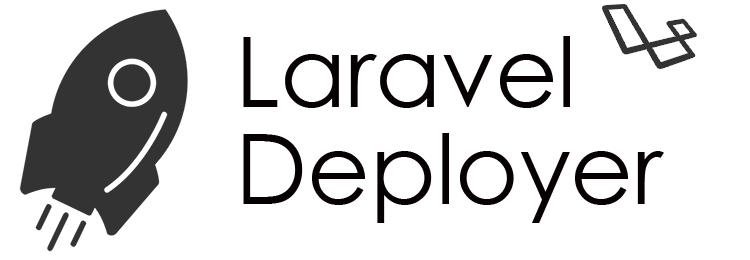
<style>
.page{position:relative;width:750px;height:260px;background:#ffffff}
.page>*{position:absolute;margin:0}
.t1{font:96.6px/96.6px "CenturyGothic";color:#060000}
</style>
<div class="page">
<p class="t1" style="left:243px;top:36px;width:421px;height:187px">Laravel<br>Deployer</p>
</div>
